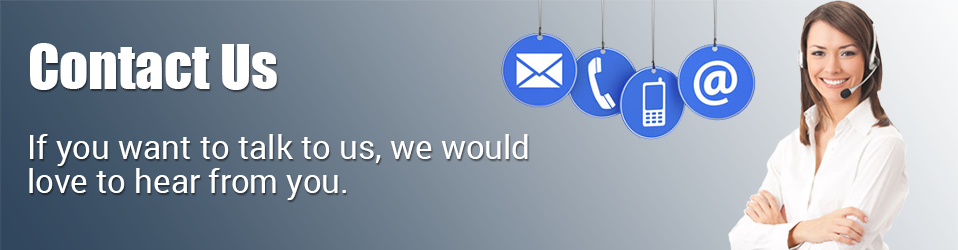
<style>
.page{position:relative;width:958px;height:250px}
.page>*{position:absolute;margin:0}
.t1{font:57px "Impact";color:#ffffff}
.t2{font:33px/34.5px "Roboto-Regular";color:#ffffff}
</style>
<div class="page">
<p class="t1" style="left:30px;top:43px;width:247px;height:47px">Contact Us</p>
<p class="t2" style="left:29px;top:134px;width:499px;height:66px">If you want to talk to us, we would <br>love to hear from you.</p>
</div>
